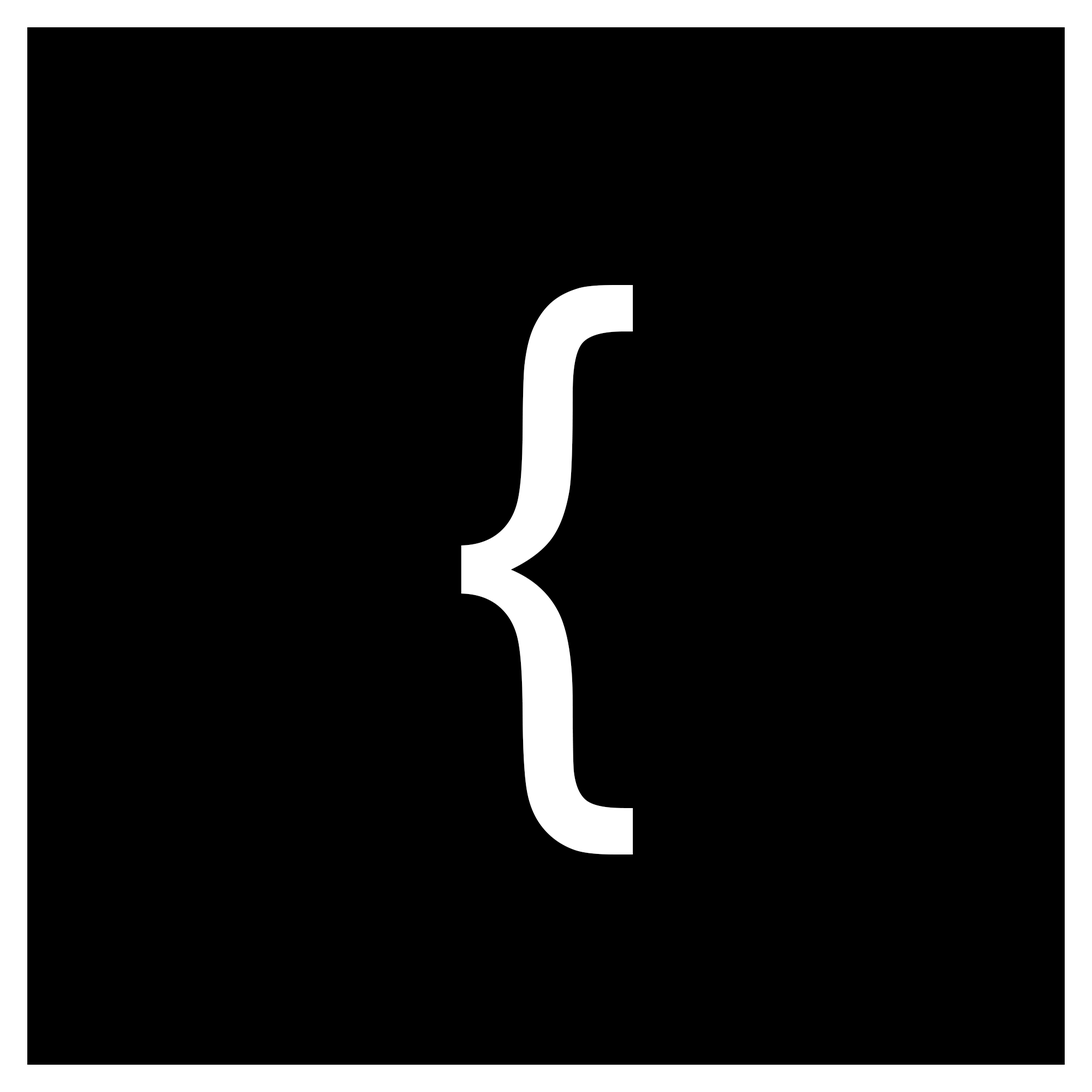
<style>
.page{position:relative;width:1092px;height:1092px;background:#000000}
.page>*{position:absolute;margin:0}
.t1{font:606.7px "ArialMT";color:#ffffff}
</style>
<div class="page">
<p class="t1" style="left:461px;top:285px;width:172px;height:569px">{</p>
</div>
